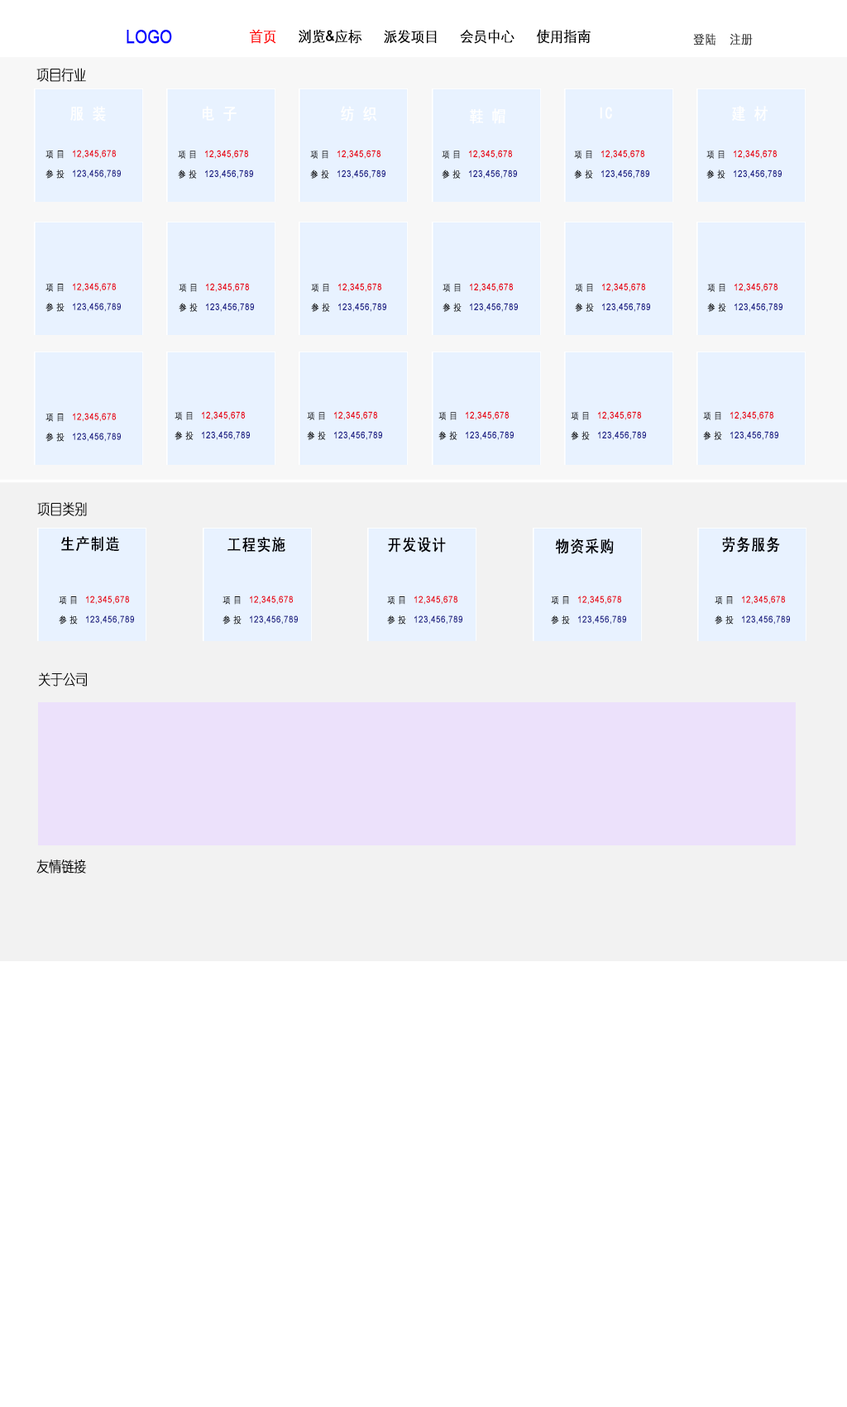
<style>
.page{position:relative;width:847px;height:1407px;background:#ffffff}
.page>*{position:absolute;margin:0}
.t1{font:18.2px "ArialMT";color:#0000ff;font-variant:small-caps;font-weight:bold;scale:0.86 1}
.t2{font:14.6px "STXihei";color:#000000;font-variant:small-caps;font-weight:bold;scale:0.94 1}
.t3{font:14.6px "STXihei";color:#ff0000;font-variant:small-caps;font-weight:bold;scale:0.94 1}
.t4{font:14.6px "ArialMT";color:#000000;font-variant:small-caps;font-weight:bold;scale:0.94 1}
.t5{font:12.7px "STXihei";color:#434343;font-variant:small-caps;font-weight:bold;scale:0.86 1}
.t6{font:14.4px "YouYuan";color:#080808;font-variant:small-caps;font-weight:bold;scale:0.86 1}
.t7{font:16.4px "SimHei";color:#ffffff;font-variant:small-caps;font-weight:bold;scale:0.86 1}
.t8{font:9.1px "ArialMT";color:#1d2088;font-variant:small-caps;font-weight:bold;scale:0.86 1}
.t9{font:9.1px "STXihei";color:#080808;font-variant:small-caps;font-weight:bold;scale:0.86 1}
.t10{font:9.1px "ArialMT";color:#e60012;font-variant:small-caps;font-weight:bold;scale:0.86 1}
.t11{font:9.1px "ArialMT";color:#1d2088;font-variant:small-caps;font-weight:bold;scale:0.87 1}
.t12{font:9.1px "STXihei";color:#080808;font-variant:small-caps;font-weight:bold;scale:0.87 1}
.t13{font:9.1px "ArialMT";color:#e60012;font-variant:small-caps;font-weight:bold;scale:0.87 1}
.t14{font:14.5px "YouYuan";color:#080808;font-variant:small-caps;font-weight:bold;scale:0.86 1}
.t15{font:16.4px "SimHei";color:#010105;font-variant:small-caps;font-weight:bold;scale:0.86 1}
.t16{font:16.5px "SimHei";color:#010105;font-variant:small-caps;font-weight:bold;scale:0.85 1}
</style>
<div class="page">
<p class="t1" style="left:127px;top:30px;width:45px;height:14px">LOGO</p>
<p class="t2" style="left:250px;top:29px;width:341px;height:15px"><span class="t3">首页 </span>     浏览<span class="t4">&amp;</span>应标      派发项目      会员中心      使用指南</p>
<p class="t5" style="left:693px;top:33px;width:60px;height:13px">登陆    注册</p>
<p class="t6" style="left:36px;top:68px;width:50px;height:14px">项目行业</p>
<p class="t7" style="left:70px;top:106px;width:36px;height:16px">服 装</p>
<p class="t7" style="left:203px;top:106px;width:34px;height:16px">电 子</p>
<p class="t7" style="left:341px;top:106px;width:36px;height:16px">纺 织</p>
<p class="t7" style="left:470px;top:108px;width:36px;height:16px">鞋 帽</p>
<p class="t7" style="left:600px;top:107px;width:12px;height:12px">IC</p>
<p class="t7" style="left:732px;top:106px;width:36px;height:16px">建 材</p>
<p class="t8" style="left:46px;top:150px;width:75px;height:29px"><span class="t9">项 目   </span><span class="t10">12,345,678<br></span><span class="t9"><br>参 投   </span>123,456,789</p>
<p class="t11" style="left:178px;top:150px;width:75px;height:29px"><span class="t12">项 目   </span><span class="t13">12,345,678<br></span><span class="t12"><br>参 投   </span>123,456,789</p>
<p class="t11" style="left:310px;top:150px;width:76px;height:29px"><span class="t12">项 目   </span><span class="t13">12,345,678<br></span><span class="t12"><br>参 投   </span>123,456,789</p>
<p class="t11" style="left:442px;top:150px;width:75px;height:29px"><span class="t12">项 目   </span><span class="t13">12,345,678<br></span><span class="t12"><br>参 投   </span>123,456,789</p>
<p class="t11" style="left:574px;top:150px;width:76px;height:29px"><span class="t12">项 目   </span><span class="t13">12,345,678<br></span><span class="t12"><br>参 投   </span>123,456,789</p>
<p class="t11" style="left:707px;top:150px;width:75px;height:29px"><span class="t12">项 目   </span><span class="t13">12,345,678<br></span><span class="t12"><br>参 投   </span>123,456,789</p>
<p class="t8" style="left:46px;top:283px;width:75px;height:29px"><span class="t9">项 目   </span><span class="t10">12,345,678<br></span><span class="t9"><br>参 投   </span>123,456,789</p>
<p class="t11" style="left:179px;top:283px;width:75px;height:29px"><span class="t12">项 目   </span><span class="t13">12,345,678<br></span><span class="t12"><br>参 投   </span>123,456,789</p>
<p class="t11" style="left:311px;top:283px;width:75px;height:29px"><span class="t12">项 目   </span><span class="t13">12,345,678<br></span><span class="t12"><br>参 投   </span>123,456,789</p>
<p class="t11" style="left:443px;top:283px;width:75px;height:29px"><span class="t12">项 目   </span><span class="t13">12,345,678<br></span><span class="t12"><br>参 投   </span>123,456,789</p>
<p class="t11" style="left:575px;top:283px;width:75px;height:29px"><span class="t12">项 目   </span><span class="t13">12,345,678<br></span><span class="t12"><br>参 投   </span>123,456,789</p>
<p class="t11" style="left:707px;top:283px;width:76px;height:29px"><span class="t12">项 目   </span><span class="t13">12,345,678<br></span><span class="t12"><br>参 投   </span>123,456,789</p>
<p class="t8" style="left:46px;top:413px;width:75px;height:29px"><span class="t9">项 目   </span><span class="t10">12,345,678<br></span><span class="t9"><br>参 投   </span>123,456,789</p>
<p class="t11" style="left:175px;top:411px;width:75px;height:29px"><span class="t12">项 目   </span><span class="t13">12,345,678<br></span><span class="t12"><br>参 投   </span>123,456,789</p>
<p class="t11" style="left:307px;top:411px;width:75px;height:29px"><span class="t12">项 目   </span><span class="t13">12,345,678<br></span><span class="t12"><br>参 投   </span>123,456,789</p>
<p class="t11" style="left:439px;top:411px;width:75px;height:29px"><span class="t12">项 目   </span><span class="t13">12,345,678<br></span><span class="t12"><br>参 投   </span>123,456,789</p>
<p class="t11" style="left:571px;top:411px;width:75px;height:29px"><span class="t12">项 目   </span><span class="t13">12,345,678<br></span><span class="t12"><br>参 投   </span>123,456,789</p>
<p class="t11" style="left:703px;top:411px;width:76px;height:29px"><span class="t12">项 目   </span><span class="t13">12,345,678<br></span><span class="t12"><br>参 投   </span>123,456,789</p>
<p class="t14" style="left:37px;top:502px;width:50px;height:14px">项目类别</p>
<p class="t15" style="left:61px;top:536px;width:58px;height:16px">生产制造</p>
<p class="t15" style="left:228px;top:537px;width:57px;height:16px">工程实施</p>
<p class="t16" style="left:388px;top:537px;width:58px;height:16px">开发设计</p>
<p class="t16" style="left:555px;top:539px;width:59px;height:15px">物资采购</p>
<p class="t16" style="left:722px;top:537px;width:58px;height:16px">劳务服务</p>
<p class="t8" style="left:59px;top:596px;width:75px;height:29px"><span class="t9">项 目   </span><span class="t10">12,345,678<br></span><span class="t9"><br>参 投   </span>123,456,789</p>
<p class="t8" style="left:223px;top:596px;width:75px;height:29px"><span class="t9">项 目   </span><span class="t10">12,345,678<br></span><span class="t9"><br>参 投   </span>123,456,789</p>
<p class="t8" style="left:387px;top:596px;width:76px;height:29px"><span class="t9">项 目   </span><span class="t10">12,345,678<br></span><span class="t9"><br>参 投   </span>123,456,789</p>
<p class="t8" style="left:551px;top:596px;width:75px;height:29px"><span class="t9">项 目   </span><span class="t10">12,345,678<br></span><span class="t9"><br>参 投   </span>123,456,789</p>
<p class="t8" style="left:715px;top:596px;width:75px;height:29px"><span class="t9">项 目   </span><span class="t10">12,345,678<br></span><span class="t9"><br>参 投   </span>123,456,789</p>
<p class="t14" style="left:38px;top:673px;width:49px;height:14px">关于公司</p>
<p class="t14" style="left:36px;top:860px;width:50px;height:14px">友情链接</p>
</div>
